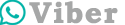
<style>
.page{position:relative;width:125px;height:25px;background:#ffffff}
.page>*{position:absolute;margin:0}
.t1{font:30px "BookmanOldStyle-Bold";letter-spacing:0.025em;color:#a6a7a7;font-weight:bold}
</style>
<div class="page">
<p class="t1" style="left:29px;top:1px;width:89px;height:23px">Viber</p>
</div>
